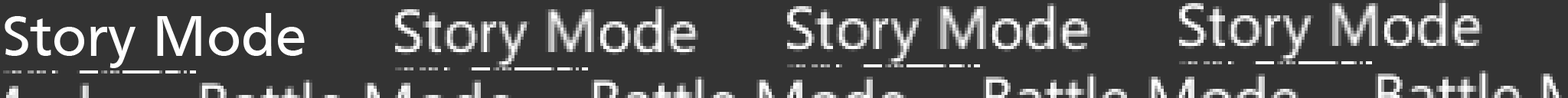
<style>
.page{position:relative;width:1568px;height:98px;background:#333333}
.page>*{position:absolute;margin:0}
.t1{font:59.5px "Frutiger";color:#ffffff}
</style>
<div class="page">
<p class="t1" style="left:5px;top:13px;width:300px;height:55px">Story Mode</p>
</div>
